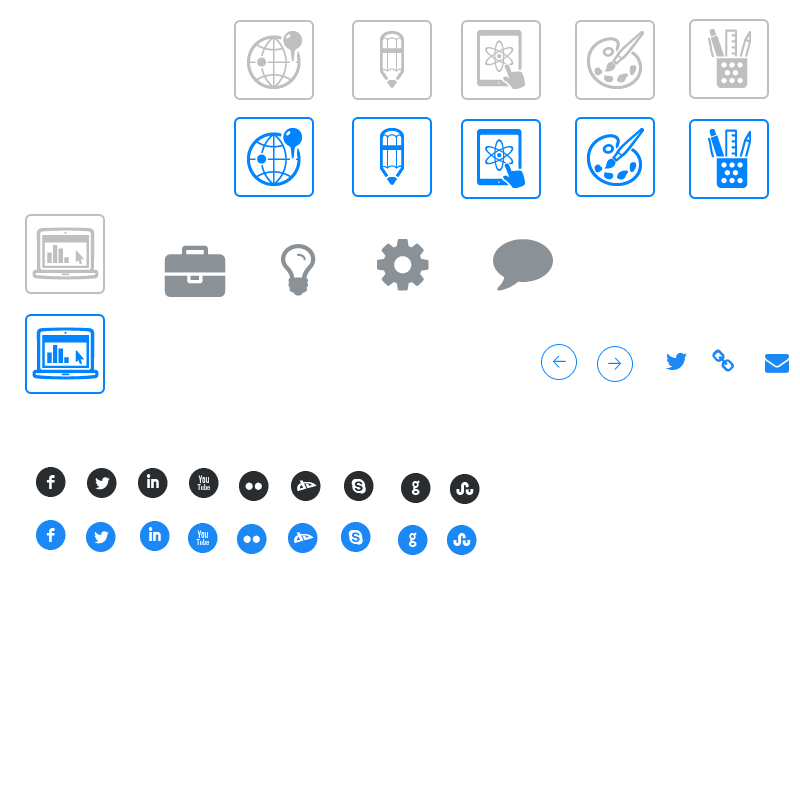
<style>
.page{position:relative;width:800px;height:800px;background:#ffffff}
.page>*{position:absolute;margin:0}
.t1{font:42px "Socialico";color:#2a2d2f}
.t2{font:42px "Socialico";color:#1b88f5}
</style>
<div class="page">
<p class="t1" style="left:36px;top:467px;width:30px;height:30px">f</p>
<p class="t1" style="left:87px;top:468px;width:30px;height:30px">l</p>
<p class="t1" style="left:138px;top:468px;width:30px;height:30px">i</p>
<p class="t1" style="left:189px;top:468px;width:30px;height:30px">x</p>
<p class="t1" style="left:239px;top:471px;width:30px;height:30px">n</p>
<p class="t1" style="left:291px;top:471px;width:30px;height:30px">j</p>
<p class="t1" style="left:344px;top:471px;width:30px;height:30px">h</p>
<p class="t1" style="left:401px;top:473px;width:30px;height:30px">g</p>
<p class="t1" style="left:449px;top:474px;width:31px;height:30px">s</p>
<p class="t2" style="left:36px;top:520px;width:30px;height:30px">f</p>
<p class="t2" style="left:140px;top:521px;width:30px;height:30px">i</p>
<p class="t2" style="left:86px;top:522px;width:30px;height:30px">l</p>
<p class="t2" style="left:188px;top:523px;width:30px;height:30px">x</p>
<p class="t2" style="left:237px;top:524px;width:30px;height:30px">n</p>
<p class="t2" style="left:288px;top:523px;width:30px;height:30px">j</p>
<p class="t2" style="left:341px;top:522px;width:30px;height:30px">h</p>
<p class="t2" style="left:398px;top:525px;width:30px;height:30px">g</p>
<p class="t2" style="left:446px;top:525px;width:31px;height:30px">s</p>
</div>
